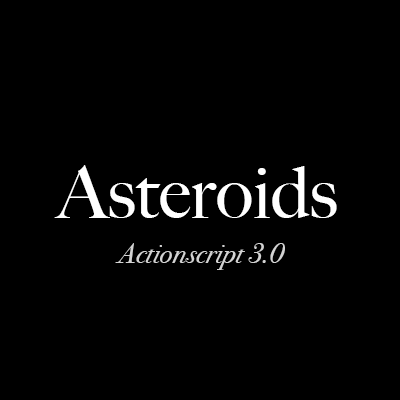
<style>
.page{position:relative;width:400px;height:400px;background:#000000}
.page>*{position:absolute;margin:0}
.t1{font:72px "BigCaslon-Medium";color:#ffffff}
.t2{font:28px "BodoniSvtyTwoITCTT-BookIta";color:#d3d3d3}
</style>
<div class="page">
<p class="t1" style="left:54px;top:165px;width:283px;height:53px">Asteroids</p>
<p class="t2" style="left:115px;top:243px;width:170px;height:27px">Actionscript 3.0</p>
</div>
